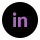
<style>
.page{position:relative;width:40px;height:40px;background:#000000}
.page>*{position:absolute;margin:0}
.t1{font:19.4px "Lato-Heavy";color:#a568b4}
</style>
<div class="page">
<p class="t1" style="left:12px;top:12px;width:15px;height:15px">in</p>
</div>
